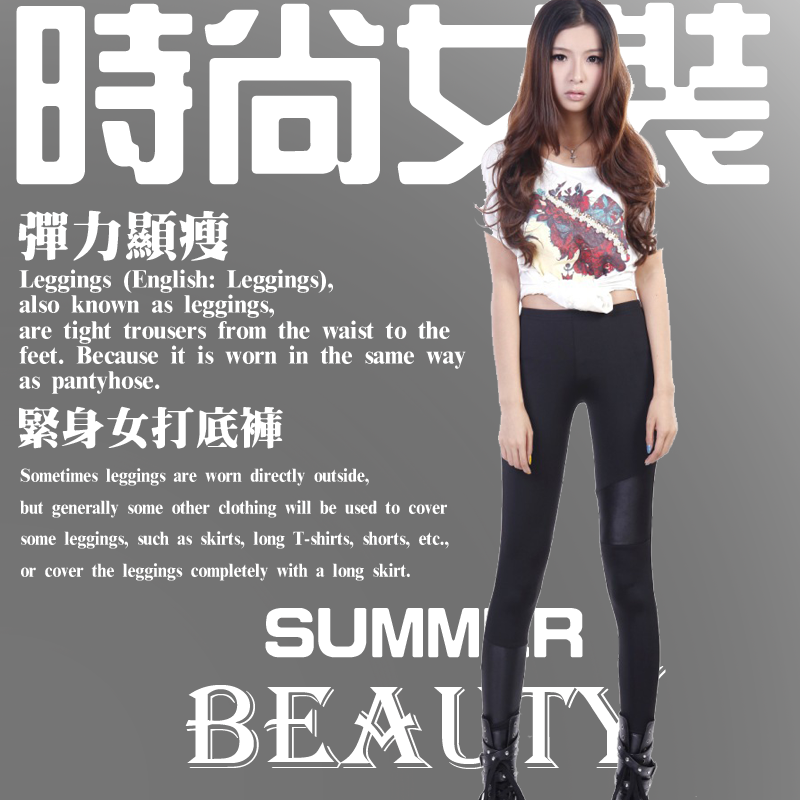
<style>
.page{position:relative;width:800px;height:800px}
.page>*{position:absolute;margin:0}
.t1{font:192.4px "HanWangZonYi";color:#ffffff}
.t2{font:53.8px "HanWangMingBlack";color:#ffffff}
.t3{font:24px "HanWangMingBlack";color:#ffffff}
.t4{font:44.7px "HanWangMingBlack";color:#ffffff}
.t5{font:18px "HanWangMingBlack";color:#ffffff;scale:0.94 1}
.t6{font:74px "HanWangZonYi";color:#ffffff}
.t7{font:122.3px "Algerian";color:#ffffff}
</style>
<div class="page">
<p class="t1" style="left:16px;top:2px;width:754px;height:183px">時尚女裝</p>
<p class="t2" style="left:18px;top:210px;width:211px;height:51px">彈力顯瘦</p>
<p class="t3" style="left:19px;top:269px;width:447px;height:125px">Leggings (English: Leggings), <br>also known as leggings, <br>are tight trousers from the waist to the <br>feet. Because it is worn in the same way <br>as pantyhose.</p>
<p class="t4" style="left:18px;top:406px;width:265px;height:43px">緊身女打底褲</p>
<p class="t5" style="left:20px;top:468px;width:429px;height:113px">Sometimes leggings are worn directly outside, <br>but generally some other clothing will be used to cover <br>some leggings, such as skirts, long T-shirts, shorts, etc., <br>or cover the leggings completely with a long skirt.</p>
<p class="t6" style="left:265px;top:608px;width:318px;height:50px">SUMMER</p>
<p class="t7" style="left:185px;top:666px;width:481px;height:103px">BEAUTY</p>
</div>
